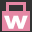
<style>
.page{position:relative;width:32px;height:32px;background:#e587a4}
.page>*{position:absolute;margin:0}
.t1{font:25px "Arial-Black";color:#ffffff}
</style>
<div class="page">
<p class="t1" style="left:4px;top:15px;width:24px;height:14px">w</p>
</div>
